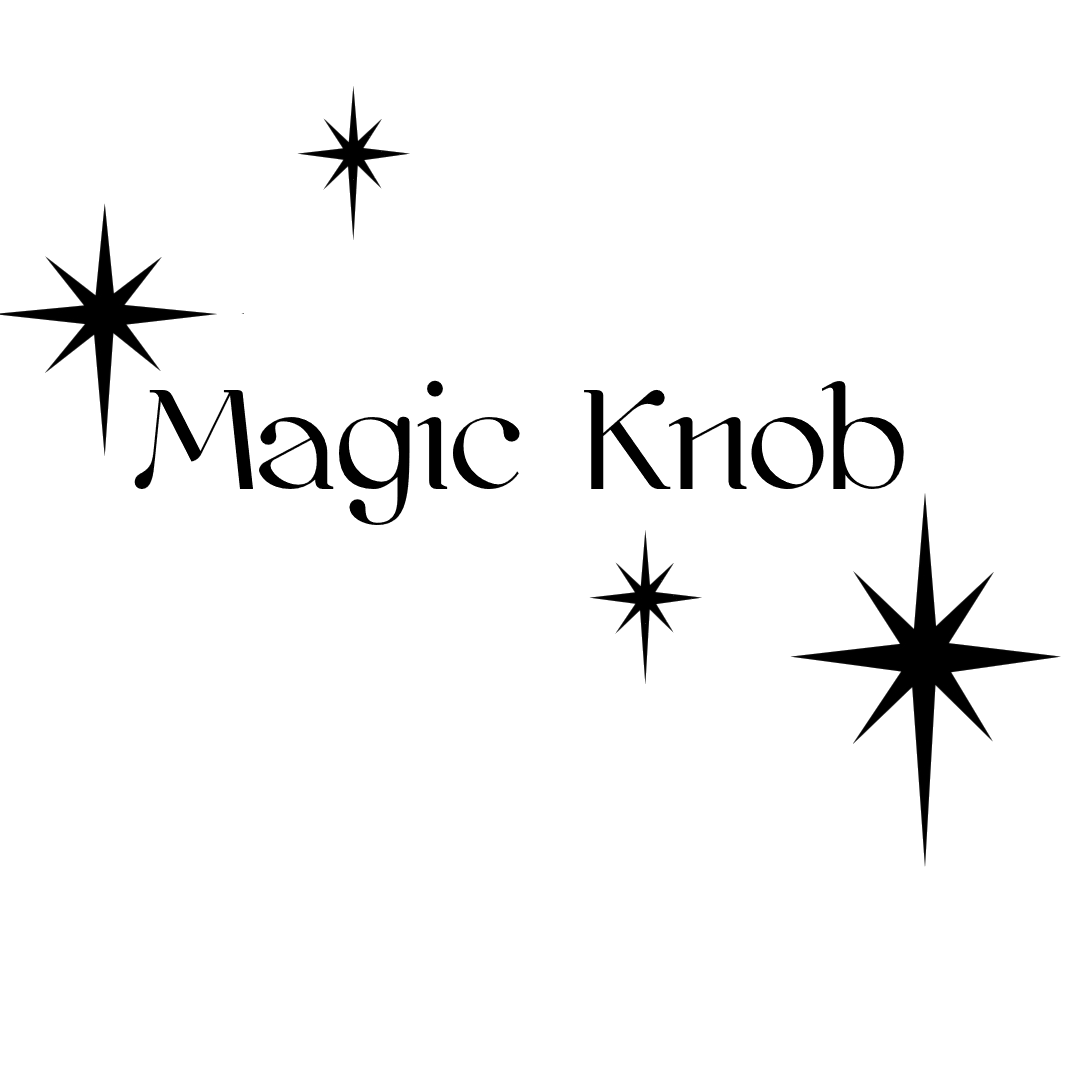
<style>
.page{position:relative;width:1080px;height:1080px;background:#ffffff}
.page>*{position:absolute;margin:0}
.t1{font:150px "kawoszeh";color:#000000}
</style>
<div class="page">
<p class="t1" style="left:134px;top:380px;width:770px;height:145px">Magic Knob</p>
</div>
